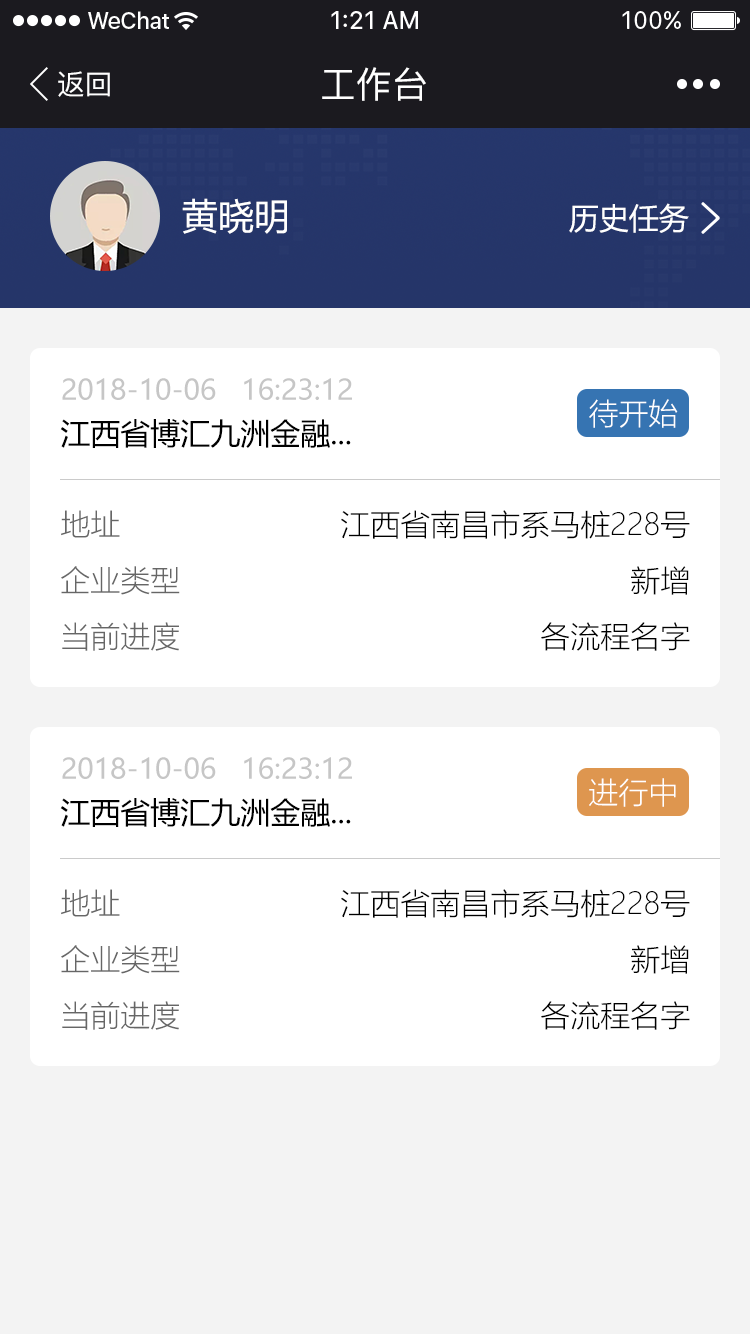
<style>
.page{position:relative;width:750px;height:1334px;background:#ffffff}
.page>*{position:absolute;margin:0}
.t1{font:28px "PingFang-SC-Medium";color:#ffffff}
.t2{font:36px "PingFang-SC-Medium";color:#ffffff}
.t3{font:36px "MicrosoftYaHei";color:#ffffff}
.t4{font:30px "MicrosoftYaHei";color:#ffffff}
.t5{font:28px "MicrosoftYaHei";color:#c6c6c6}
.t6{font:30px "MicrosoftYaHeiLight";color:#ffffff}
.t7{font:30px "MicrosoftYaHei";color:#000000}
.t8{font:30px/56px "MicrosoftYaHeiLight";color:#666666}
.t9{font:30px/56px "MicrosoftYaHeiLight";color:#000000}
</style>
<div class="page">
<p class="t1" style="left:58px;top:71px;width:52px;height:26px">返回</p>
<p class="t2" style="left:322px;top:67px;width:104px;height:34px">工作台</p>
<p class="t3" style="left:182px;top:198px;width:105px;height:36px">黄晓明</p>
<p class="t4" style="left:569px;top:203px;width:120px;height:30px">历史任务</p>
<p class="t5" style="left:62px;top:378px;width:290px;height:22px">2018-10-06   16:23:12</p>
<p class="t6" style="left:589px;top:399px;width:89px;height:29px">待开始</p>
<p class="t7" style="left:60px;top:419px;width:291px;height:29px">江西省博汇九洲金融...</p>
<p class="t8" style="left:61px;top:510px;width:119px;height:141px;text-align:justify">地址<br>企业类型<br>当前进度</p>
<p class="t9" style="left:341px;top:510px;width:349px;height:141px;text-align:right">江西省南昌市系马桩228号<br>新增<br>各流程名字</p>
<p class="t5" style="left:62px;top:757px;width:290px;height:22px">2018-10-06   16:23:12</p>
<p class="t6" style="left:589px;top:778px;width:87px;height:29px">进行中</p>
<p class="t7" style="left:60px;top:798px;width:291px;height:29px">江西省博汇九洲金融...</p>
<p class="t8" style="left:61px;top:889px;width:119px;height:141px;text-align:justify">地址<br>企业类型<br>当前进度</p>
<p class="t9" style="left:341px;top:889px;width:349px;height:141px;text-align:right">江西省南昌市系马桩228号<br>新增<br>各流程名字</p>
</div>
